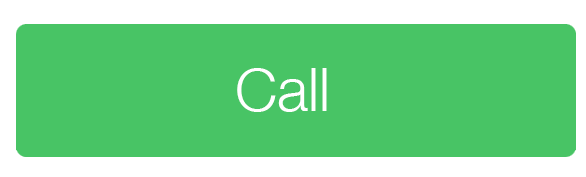
<style>
.page{position:relative;width:586px;height:177px;background:#48c465}
.page>*{position:absolute;margin:0}
.t1{font:60px "HelveticaNeue-Light";color:#ffffff}
</style>
<div class="page">
<p class="t1" style="left:237px;top:68px;width:90px;height:44px">Call</p>
</div>
